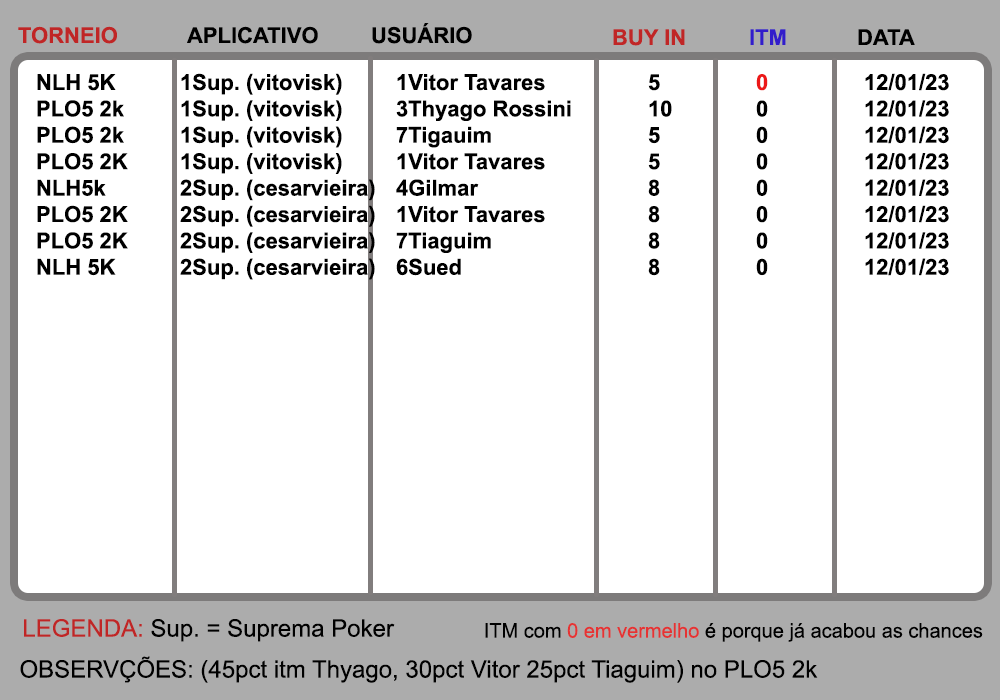
<style>
.page{position:relative;width:1000px;height:700px;background:#ffffff}
.page>*{position:absolute;margin:0}
.t1{font:22px "Arial-BoldMT";color:#c02626}
.t2{font:22px "Arial-BoldMT";color:#000000}
.t3{font:22px "Arial-BoldMT";color:#321dcb}
.t4{font:22px "Arial-BoldMT";color:#ec1818}
.t5{font:24px "ArialMT";color:#000000}
.t6{font:24px "ArialMT";color:#c02626}
.t7{font:20px "ArialMT";color:#000000}
.t8{font:20px "ArialMT";color:#e63333}
</style>
<div class="page">
<p class="t1" style="left:18px;top:26px;width:99px;height:18px">TORNEIO</p>
<p class="t2" style="left:187px;top:26px;width:131px;height:18px">APLICATIVO</p>
<p class="t2" style="left:372px;top:23px;width:100px;height:21px">USUÁRIO</p>
<p class="t1" style="left:613px;top:29px;width:72px;height:17px">BUY IN</p>
<p class="t3" style="left:750px;top:29px;width:36px;height:16px">ITM</p>
<p class="t2" style="left:858px;top:29px;width:57px;height:16px">DATA</p>
<p class="t2" style="left:37px;top:73px;width:912px;height:207px">NLH 5K  1Sup. (vitovisk)  1Vitor Tavares   5   <span class="t4">0</span>   12/01/23<br>PLO5 2k  1Sup. (vitovisk)  3Thyago Rossini   10   0   12/01/23<br>PLO5 2k  1Sup. (vitovisk)  7Tigauim     5   0   12/01/23<br>PLO5 2K   1Sup. (vitovisk)  1Vitor Tavares   5   0   12/01/23<br>NLH5k   2Sup. (cesarvieira) 4Gilmar     8   0   12/01/23<br>PLO5 2K  2Sup. (cesarvieira) 1Vitor Tavares   8   0   12/01/23<br>PLO5 2K  2Sup. (cesarvieira) 7Tiaguim     8   0   12/01/23<br>NLH 5K  2Sup. (cesarvieira) 6Sued      8   0   12/01/23</p>
<p class="t5" style="left:24px;top:619px;width:371px;height:23px"><span class="t6">LEGENDA:</span> Sup. = Suprema Poker</p>
<p class="t7" style="left:485px;top:623px;width:498px;height:19px">ITM com <span class="t8">0 em vermelho</span> é porque já acabou as chances</p>
<p class="t5" style="left:20px;top:656px;width:798px;height:27px">OBSERVÇÕES: (45pct itm Thyago, 30pct Vitor 25pct Tiaguim) no PLO5 2k</p>
</div>
